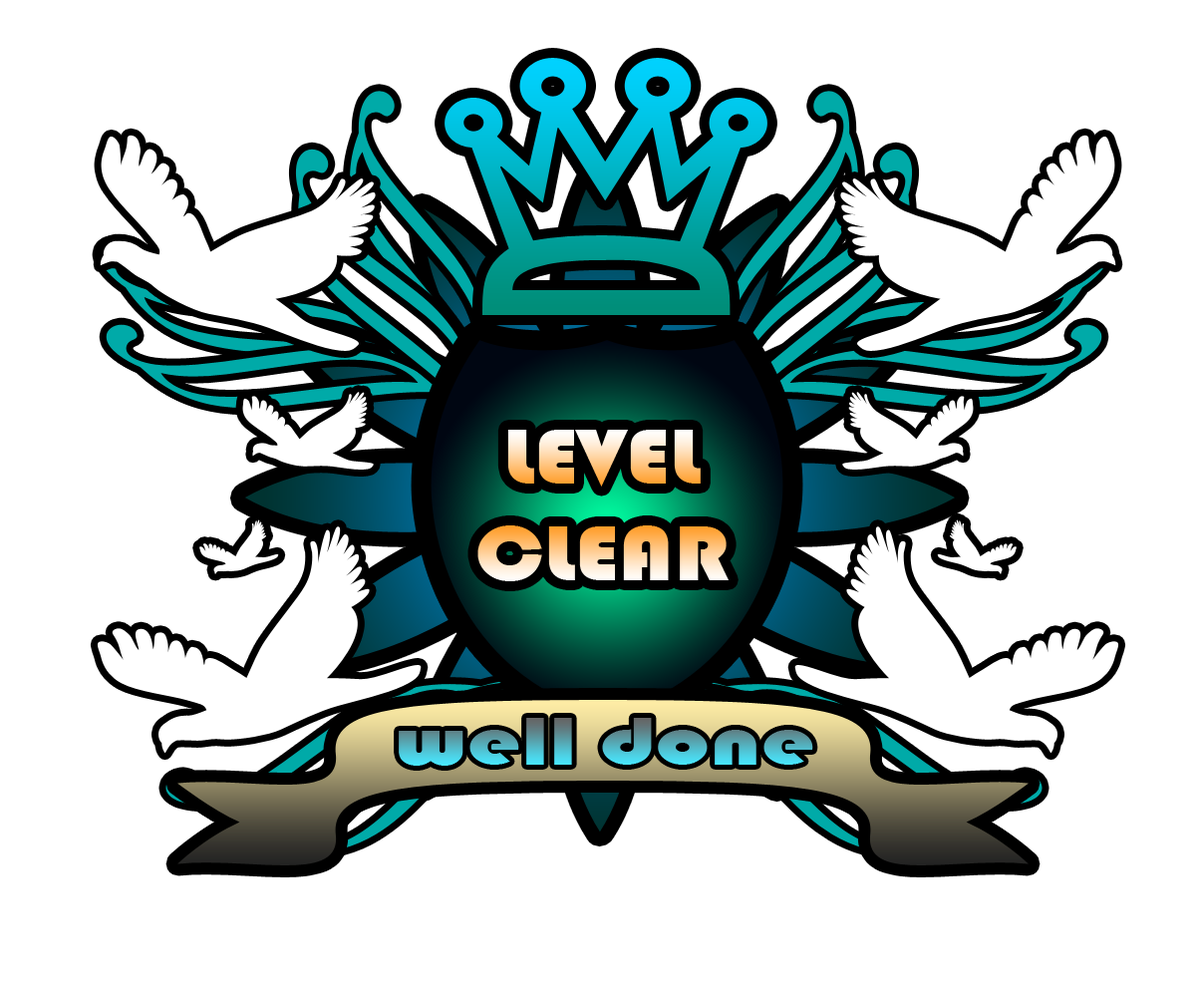
<style>
.page{position:relative;width:1196px;height:997px;background:#ffffff}
.page>*{position:absolute;margin:0}
.t1{font:80.9px "Bauhaus93";scale:1.13 1}
.t2{font:71.1px "Bauhaus93";scale:1.35 1}
</style>
<div class="page">
<p class="t1" style="left:477px;top:430px;width:252px;height:151px;text-align:center">LEVEL<br>CLEAR</p>
<p class="t2" style="left:399px;top:718px;width:414px;height:48px">well done</p>
</div>
